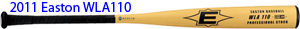
<style>
.page{position:relative;width:300px;height:29px;background:#ffffff}
.page>*{position:absolute;margin:0}
.t1{font:14px "MyriadPro-Regular";color:#0000ff}
</style>
<div class="page">
<p class="t1" style="left:10px;top:2px;width:121px;height:10px">2011 Easton WLA110</p>
</div>
